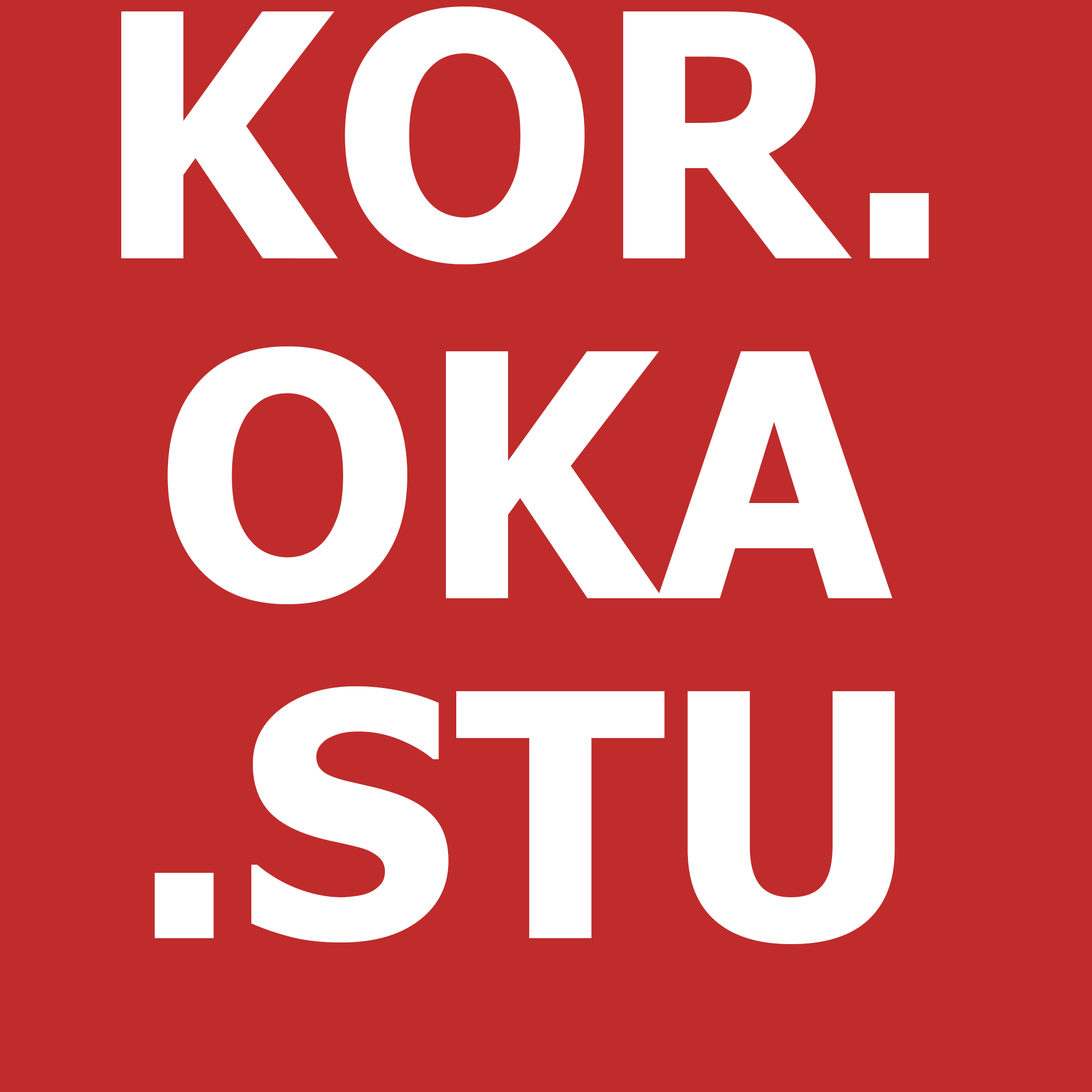
<style>
.page{position:relative;width:1092px;height:1092px;background:#bf2c2b}
.page>*{position:absolute;margin:0}
.t1{font:339.9px/339.9px "Tahoma-Bold";letter-spacing:0.005em;color:#ffffff}
</style>
<div class="page">
<p class="t1" style="left:121px;top:7px;width:808px;height:937px;text-align:center">KOR.<br>OKA<br>.STU<br>DIO</p>
</div>
